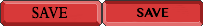
<style>
.page{position:relative;width:203px;height:26px;background:#d83939}
.page>*{position:absolute;margin:0}
.t1{font:18px "Perpetua";color:#000000}
.t2{font:12px "MyanmarMN-Bold";color:#000000}
</style>
<div class="page">
<p class="t1" style="left:32px;top:6px;width:36px;height:13px">SAVE</p>
<p class="t2" style="left:136px;top:7px;width:33px;height:11px">SAVE</p>
</div>
